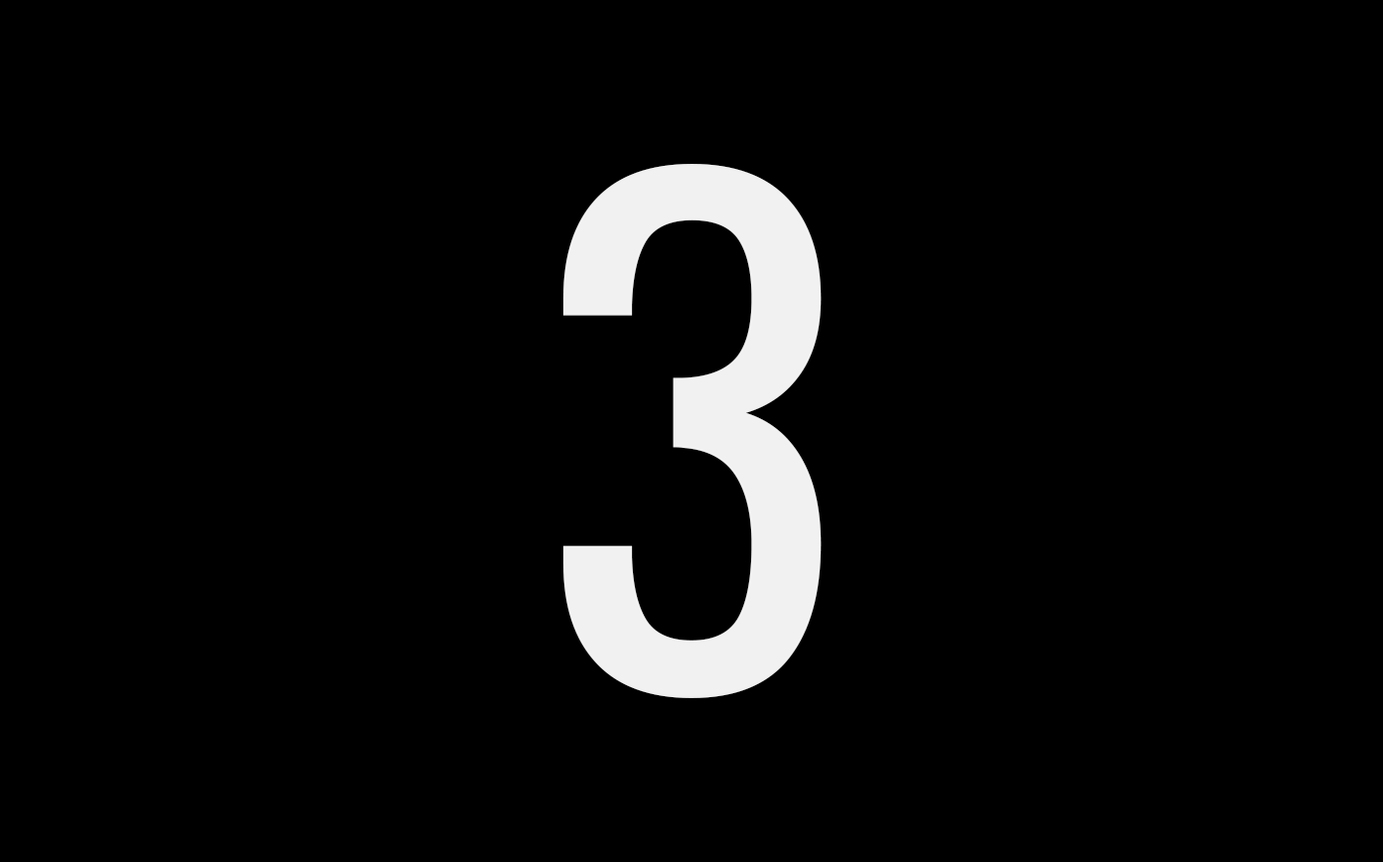
<style>
.page{position:relative;width:1383px;height:862px;background:#000000}
.page>*{position:absolute;margin:0}
.t1{font:646.8px "Oswald-Regular";color:#f1f1f1}
</style>
<div class="page">
<p class="t1" style="left:563px;top:164px;width:259px;height:534px">3</p>
</div>
